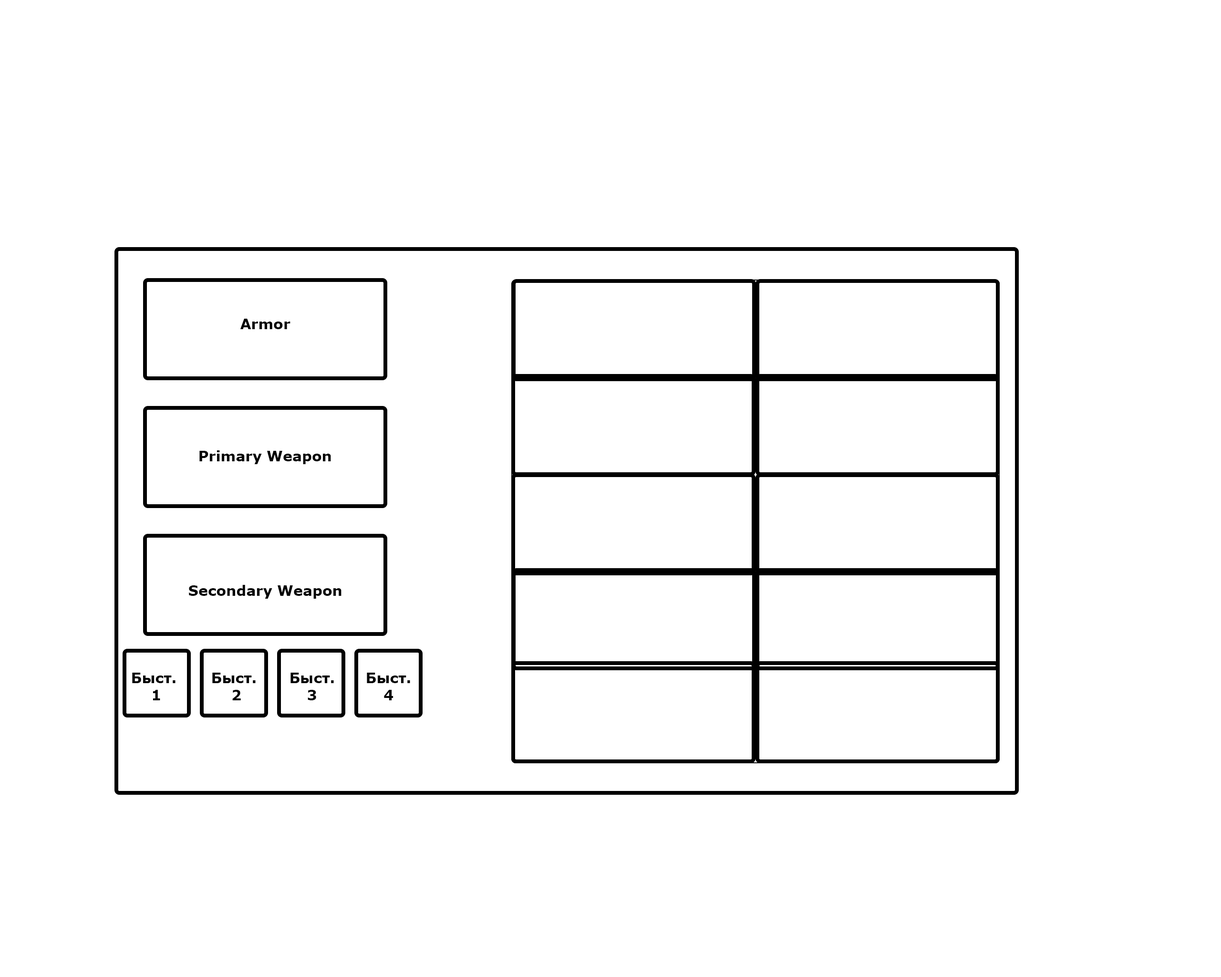
<style>
.page{position:relative;width:1221px;height:977px;background:#ffffff}
.page>*{position:absolute;margin:0}
.t1{font:14.3px "Verdana-Bold";color:#020202}
</style>
<div class="page">
<p class="t1" style="left:240px;top:319px;width:50px;height:10px">Armor</p>
<p class="t1" style="left:199px;top:450px;width:132px;height:14px">Primary Weapon</p>
<p class="t1" style="left:189px;top:585px;width:152px;height:14px">Secondary Weapon</p>
<p class="t1" style="left:132px;top:672px;width:44px;height:28px;text-align:center">Быст. <br>1</p>
<p class="t1" style="left:212px;top:672px;width:44px;height:28px;text-align:center">Быст. <br>2</p>
<p class="t1" style="left:290px;top:672px;width:44px;height:28px;text-align:center">Быст.<br>3</p>
<p class="t1" style="left:367px;top:672px;width:43px;height:28px;text-align:center">Быст.<br>4</p>
</div>
